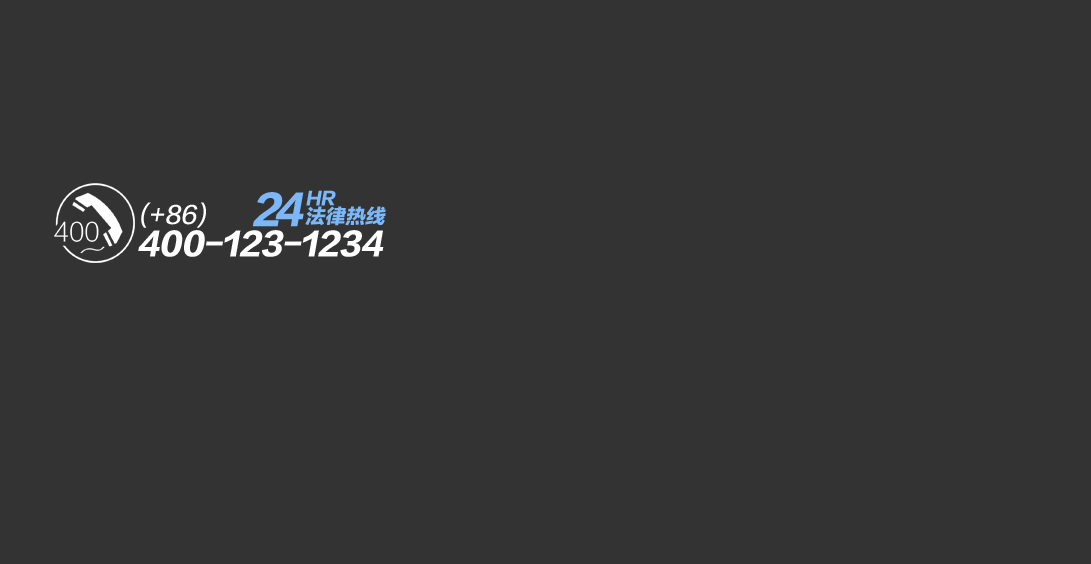
<style>
.page{position:relative;width:1091px;height:564px;background:#333333}
.page>*{position:absolute;margin:0}
.t1{font:20px "FZLTTHK--GBK1-0";color:#7cb7fa;font-style:italic}
.t2{font:39px "FZLTTHK--GBK1-0";letter-spacing:-0.16em;color:#7cb7fa;font-style:italic}
.t3{font:39px "FZLTTHK--GBK1-0";letter-spacing:0.06em;color:#7cb7fa;font-style:italic}
.t4{font:17px "FZLTTHK--GBK1-0";color:#7cb7fa;font-style:italic}
.t5{font:24px "FZLTZHK--GBK1-0";color:#ffffff;font-style:italic}
.t6{font:30px "FZLTTHK--GBK1-0";color:#ffffff;font-style:italic}
</style>
<div class="page">
<p class="t1" style="left:252px;top:192px;width:134px;height:35px"><span class="t2">2</span><span class="t3">4</span>法律热线</p>
<p class="t4" style="left:306px;top:190px;width:30px;height:16px">HR</p>
<p class="t5" style="left:141px;top:202px;width:65px;height:26px">(+86)</p>
<p class="t6" style="left:138px;top:230px;width:246px;height:27px">400-123-1234</p>
</div>
